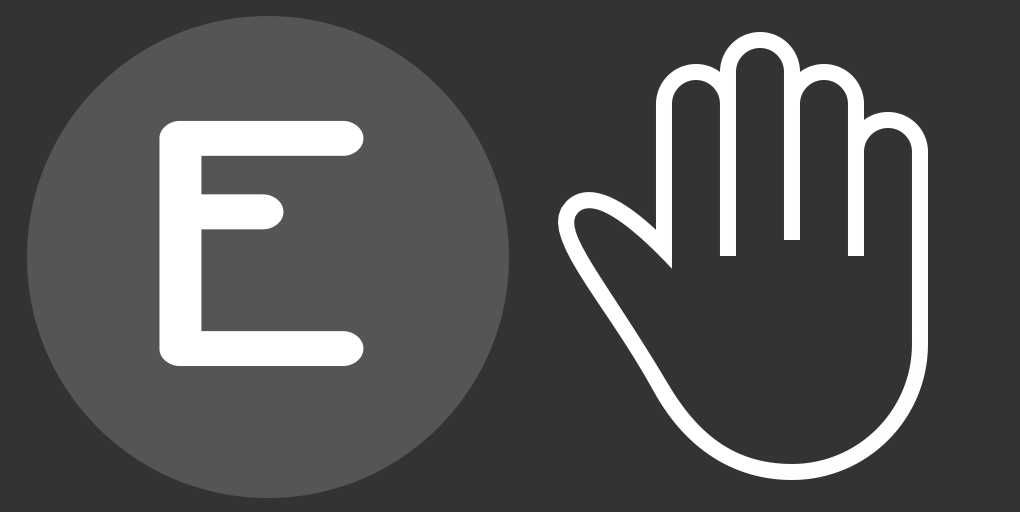
<style>
.page{position:relative;width:1020px;height:512px;background:#333333}
.page>*{position:absolute;margin:0}
.t1{font:350px "Neon80s";letter-spacing:0.1em;color:#fffffe;scale:1.2 1}
</style>
<div class="page">
<p class="t1" style="left:159px;top:120px;width:205px;height:246px">E</p>
</div>
